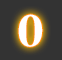
<style>
.page{position:relative;width:62px;height:60px;background:#333333}
.page>*{position:absolute;margin:0}
.t1{font:45.7px "FZCHSJW--GB1-0";color:#ffffff}
</style>
<div class="page">
<p class="t1" style="left:18px;top:14px;width:25px;height:33px;rotate:-2deg">0</p>
</div>
